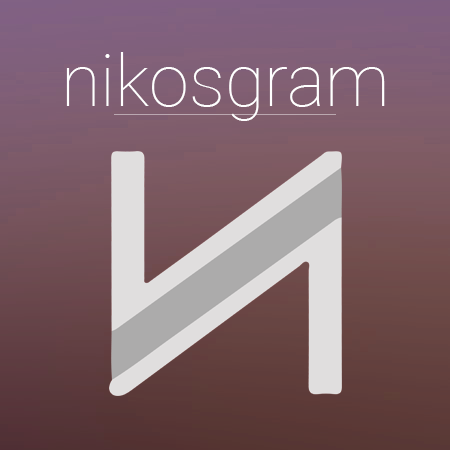
<style>
.page{position:relative;width:450px;height:450px}
.page>*{position:absolute;margin:0}
.t1{font:72px "Roboto-Thin";color:#ffffff}
</style>
<div class="page">
<p class="t1" style="left:66px;top:52px;width:319px;height:69px">nikosgram</p>
</div>
